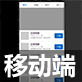
<style>
.page{position:relative;width:82px;height:82px}
.page>*{position:absolute;margin:0}
.t1{font:24px "MicrosoftYaHeiUI-Bold";color:#ffffff}
</style>
<div class="page">
<p class="t1" style="left:4px;top:54px;width:72px;height:24px">移动端</p>
</div>
